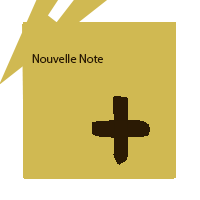
<style>
.page{position:relative;width:200px;height:200px;background:#d0b952}
.page>*{position:absolute;margin:0}
.t1{font:12px "MyriadPro-Regular";color:#2a1a04}
</style>
<div class="page">
<p class="t1" style="left:32px;top:54px;width:71px;height:9px">Nouvelle Note</p>
</div>
